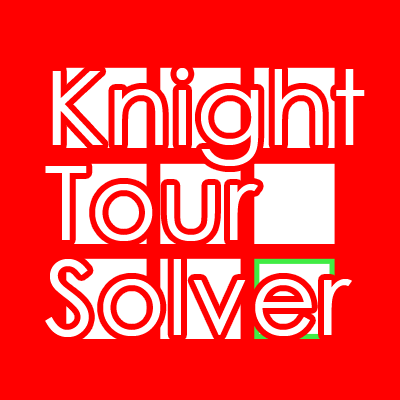
<style>
.page{position:relative;width:400px;height:400px;background:#ff0000}
.page>*{position:absolute;margin:0}
.t1{font:102.6px/95px "CenturyGothic";letter-spacing:0.025em;color:#ffffff}
</style>
<div class="page">
<p class="t1" style="left:45px;top:68px;width:320px;height:269px">Knight<br>Tour<br>Solver</p>
</div>
